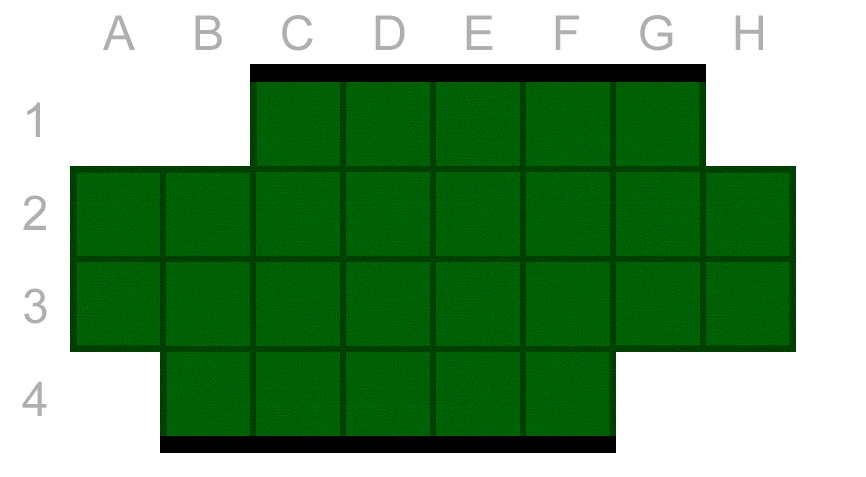
<style>
.page{position:relative;width:866px;height:477px;background:#ffffff}
.page>*{position:absolute;margin:0}
.t1{font:48px "ArialMT";letter-spacing:1.18em;color:#afafaf}
.t2{font:48px/93px "ArialMT";color:#afafaf}
</style>
<div class="page">
<p class="t1" style="left:103px;top:15px;width:660px;height:36px">ABCDEFGH</p>
<p class="t2" style="left:22px;top:102px;width:25px;height:314px">1<br>2<br>3<br>4</p>
</div>
